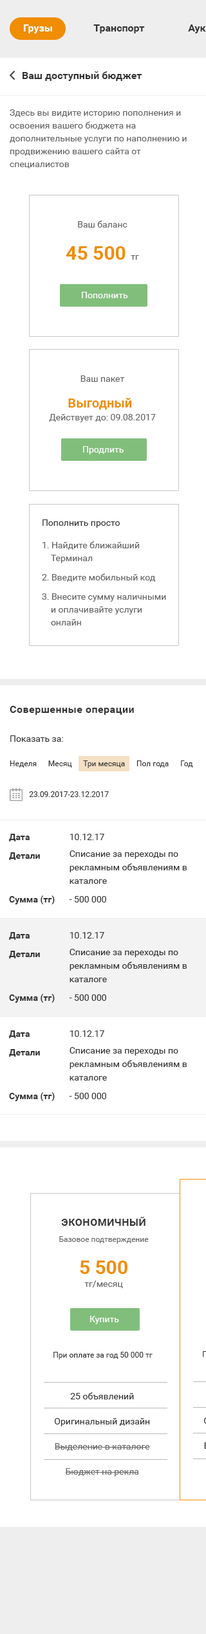
<style>
.page{position:relative;width:206px;height:1634px;background:#ffffff}
.page>*{position:absolute;margin:0}
.t1{font:10.3px "Roboto-Bold";color:#333333}
.t2{font:9px/12.9px "Roboto-Regular";color:#666666}
.t3{font:19.3px/12.9px "Roboto-Bold";color:#f08d00}
.t4{font:9px "Roboto-Regular";color:#ffffff}
.t5{font:12.9px/12.9px "Roboto-Bold";color:#f08d00}
.t6{font:9px/15.4px "Roboto-Regular";color:#333333}
.t7{font:10.3px "Roboto-Bold";letter-spacing:0.03em;color:#333333}
.t8{font:9px "Roboto-Regular";color:#333333}
.t9{font:7.7px "Roboto-Regular";color:#333333}
.t10{font:9px/15.4px "Roboto-Bold";color:#333333}
.t11{font:9px/13.5px "Roboto-Regular";color:#333333}
.t12{font:7.7px/12.9px "Roboto-Regular";color:#333333}
.t13{font:10.3px/12.9px "Roboto-Bold";letter-spacing:0.03em;color:#333333;text-transform:uppercase}
.t14{font:7.7px/12.9px "Roboto-Regular";color:#666666}
.t15{font:9px/15.4px "Roboto-Regular";color:#666666}
</style>
<div class="page">
<p class="t1" style="left:22px;top:71px;width:120px;height:10px">Ваш доступный бюджет</p>
<p class="t2" style="left:10px;top:109px;width:176px;height:59px">Здесь вы видите историю пополнения и освоения вашего бюджета на дополнительные услуги по наполнению и продвижению вашего сайта от специалистов</p>
<p class="t2" style="left:66px;top:221px;width:73px;height:39px;text-align:center">Ваш баланс<br><span class="t3">45 500 </span>тг</p>
<p class="t4" style="left:82px;top:292px;width:46px;height:6px">Пополнить</p>
<p class="t2" style="left:49px;top:375px;width:107px;height:47px;text-align:center">Ваш пакет<br><span class="t5">Выгодный </span><br>Действует до: 09.08.2017</p>
<p class="t4" style="left:83px;top:446px;width:40px;height:9px">Продлить</p>
<p class="t2" style="left:42px;top:519px;width:124px;height:107px"><span class="t6">Пополнить просто<br></span>1. Найдите ближайший Терминал<br>2. Введите мобильный код<br>3. Внесите сумму наличными и оплачивайте услуги онлайн</p>
<p class="t7" style="left:10px;top:706px;width:124px;height:9px">Совершенные операции</p>
<p class="t8" style="left:10px;top:735px;width:53px;height:7px">Показать за:</p>
<p class="t9" style="left:10px;top:760px;width:183px;height:8px">Неделя      Месяц      Три месяца      Пол года      Год</p>
<p class="t9" style="left:29px;top:791px;width:80px;height:6px">23.09.2017-23.12.2017</p>
<p class="t10" style="left:9px;top:834px;width:46px;height:71px">Дата<br>Детали<br><br>Сумма (тг)</p>
<p class="t11" style="left:69px;top:834px;width:118px;height:69px"><span class="t6">10.12.17<br></span>Списание за переходы по рекламным объявлениям в каталоге<br><span class="t6">- 500 000</span></p>
<p class="t10" style="left:9px;top:932px;width:46px;height:71px">Дата<br>Детали<br><br>Сумма (тг)</p>
<p class="t11" style="left:69px;top:932px;width:118px;height:69px"><span class="t6">10.12.17<br></span>Списание за переходы по рекламным объявлениям в каталоге<br><span class="t6">- 500 000</span></p>
<p class="t10" style="left:9px;top:1030px;width:46px;height:71px">Дата<br>Детали<br><br>Сумма (тг)</p>
<p class="t11" style="left:69px;top:1030px;width:118px;height:69px"><span class="t6">10.12.17<br></span>Списание за переходы по рекламным объявлениям в каталоге<br><span class="t6">- 500 000</span></p>
<p class="t12" style="left:53px;top:1217px;width:99px;height:143px;text-align:center"><span class="t13">Экономичный<br></span><span class="t14">Базовое подтверждение<br></span><span class="t3">5 500<br></span><span class="t2">тг/месяц<br></span><br>При оплате за год 50 000 тг</p>
<p class="t4" style="left:90px;top:1316px;width:29px;height:8px">Купить</p>
<p class="t15" style="left:54px;top:1392px;width:96px;height:85px;text-align:center"><span class="t6">25 объявлений<br>Оригинальный дизайн<br></span>Выделение в каталоге<br>Бюджет на рекла</p>
</div>
